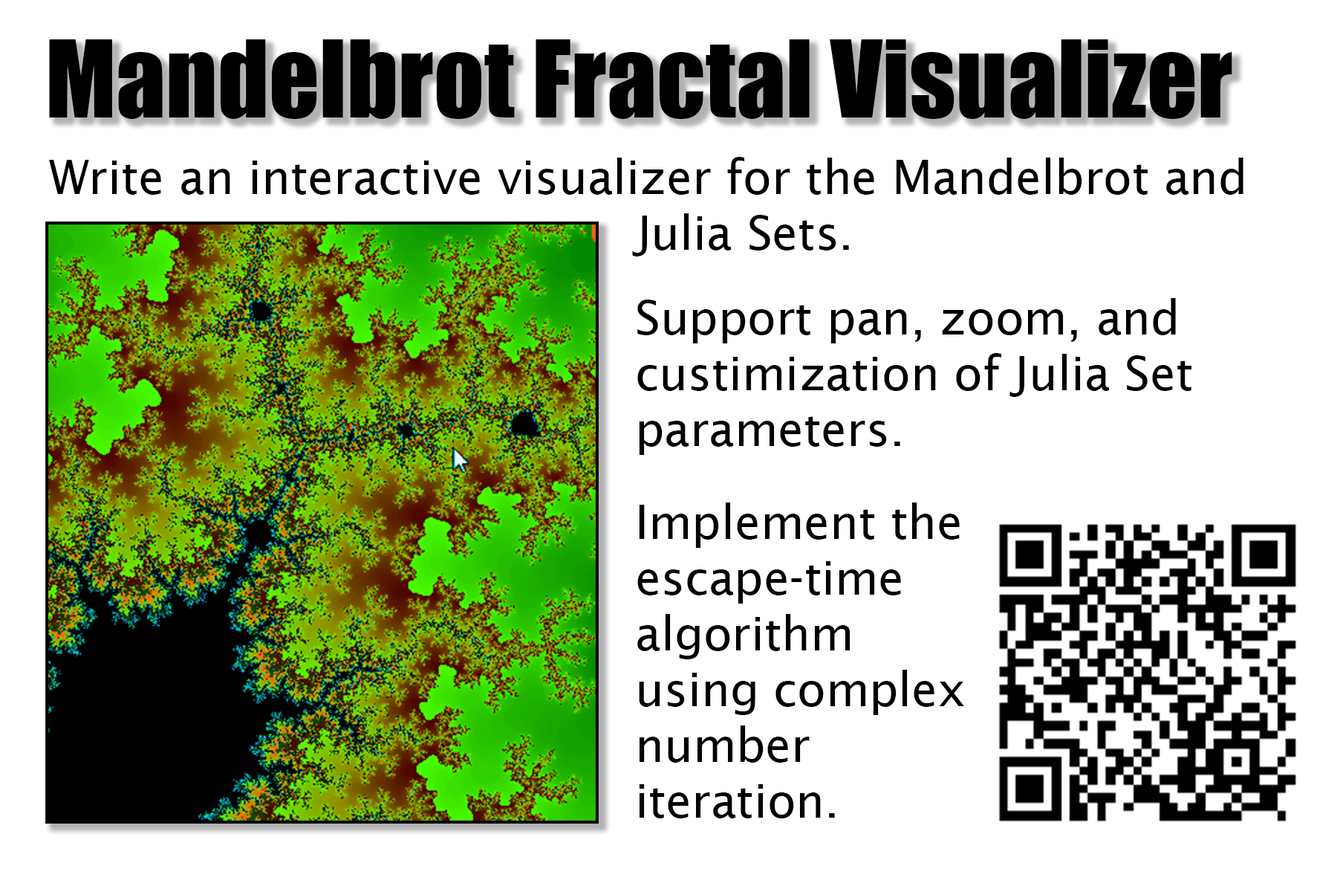
<style>
.page{position:relative;width:1337px;height:892px;background:#ffffff}
.page>*{position:absolute;margin:0}
.t1{font:99.1px "Impact";color:#000000}
.t2{font:46.4px "LucidaSans";color:#000000}
</style>
<div class="page">
<p class="t1" style="left:49px;top:39px;width:1184px;height:80px">Mandelbrot Fractal Visualizer</p>
<p class="t2" style="left:49px;top:157px;width:1195px;height:99px">Write an interactive visualizer for the Mandelbrot and<br>                                        Julia Sets.</p>
<p class="t2" style="left:637px;top:298px;width:556px;height:520px">Support pan, zoom, and <br>custimization of Julia Set <br>parameters. <br><br>Implement the <br>escape-time<br>algorithm <br>using complex <br>number <br>iteration.</p>
</div>
